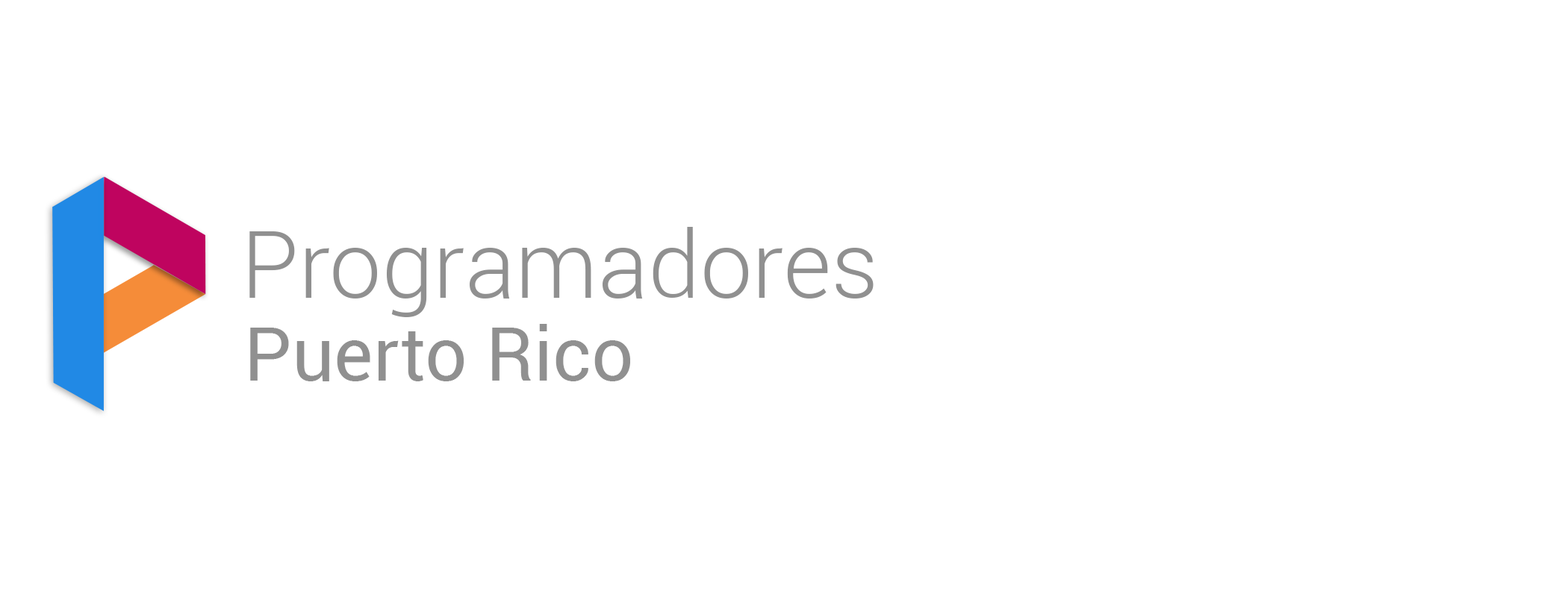
<style>
.page{position:relative;width:1568px;height:597px;background:#ffffff}
.page>*{position:absolute;margin:0}
.t1{font:93.3px "Roboto-Light";color:#909090}
.t2{font:74.7px "Roboto-Regular";color:#909090}
</style>
<div class="page">
<p class="t1" style="left:249px;top:227px;width:625px;height:90px">Programadores</p>
<p class="t2" style="left:250px;top:324px;width:380px;height:58px">Puerto Rico</p>
</div>
